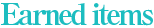
<style>
.page{position:relative;width:154px;height:28px;background:#ffffff}
.page>*{position:absolute;margin:0}
.t1{font:30px "RyuminPro-ExBold";letter-spacing:-0.1em;color:#1cbdc0}
</style>
<div class="page">
<p class="t1" style="left:1px;top:3px;width:152px;height:23px">Earned items</p>
</div>
